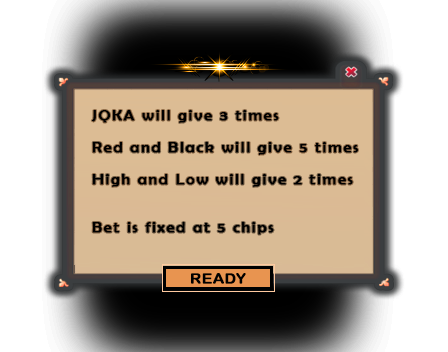
<style>
.page{position:relative;width:448px;height:352px;background:#ffffff}
.page>*{position:absolute;margin:0}
.t1{font:14.3px/16px "BerlinSansFB-Reg";letter-spacing:0.075em;color:#000000;font-weight:bold;scale:1.11 1}
.t2{font:14.3px "ArialRoundedMTBold";color:#000000;font-weight:bold;scale:1.11 1}
</style>
<div class="page">
<p class="t1" style="left:91px;top:110px;width:267px;height:125px">JQKA will give 3 times<br><br>Red and Black will give 5 times<br><br>High and Low will give 2 times<br><br><br>Bet is fixed at 5 chips</p>
<p class="t2" style="left:191px;top:273px;width:55px;height:11px">READY</p>
</div>
